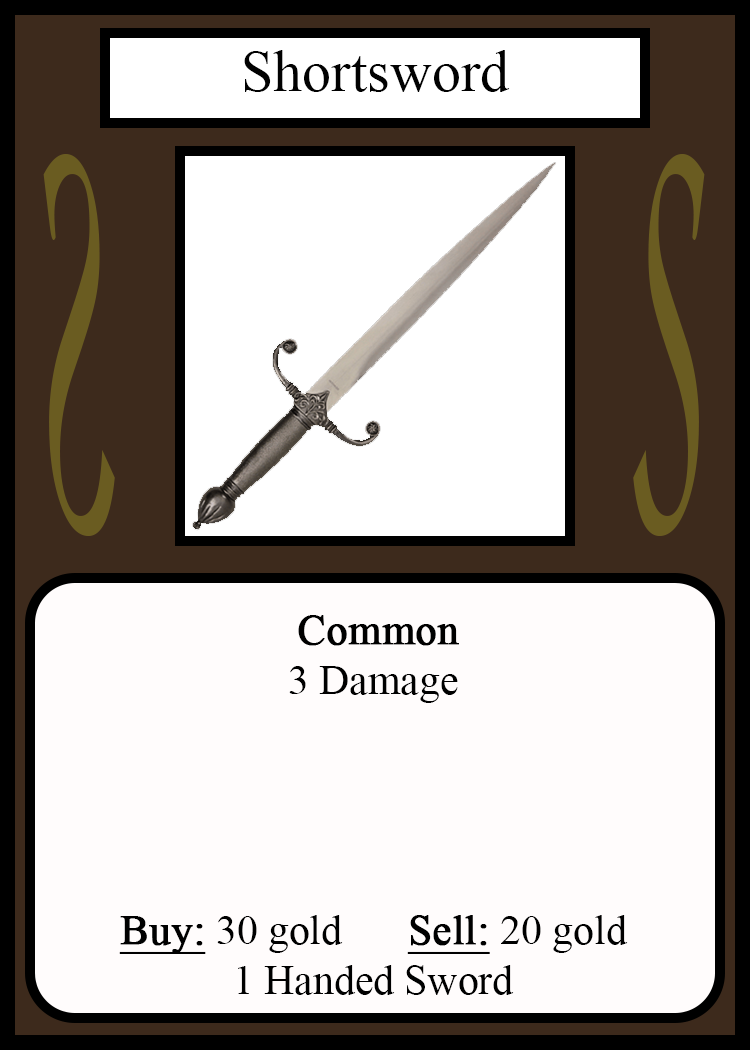
<style>
.page{position:relative;width:750px;height:1050px;background:#fffcfc}
.page>*{position:absolute;margin:0}
.t1{font:58.3px "TimesNewRomanPSMT";color:#010101}
.t2{font:548.5px "Apple-Chancery";color:#6a5c21;scale:0.27 1}
.t3{font:548.2px "Apple-Chancery";color:#6a5c21;scale:0.27 1}
.t4{font:41.7px "TimesNewRomanPSMT";color:#000000}
.t5{font:41.7px "TimesNewRomanPSMT";color:#000000;font-weight:bold}
.t6{font:41.7px "TimesNewRomanPSMT";color:#000000;font-weight:bold;text-decoration:underline}
</style>
<div class="page">
<p class="t1" style="left:244px;top:50px;width:266px;height:42px">Shortsword</p>
<p class="t2" style="left:43px;top:154px;width:72px;height:382px;rotate:180deg">S</p>
<p class="t3" style="left:633px;top:154px;width:72px;height:382px">S</p>
<p class="t4" style="left:119px;top:615px;width:509px;height:380px;text-align:center"><span class="t5">Common<br></span>3 Damage<br><br><br><br><br><span class="t6">Buy:</span> 30 gold   <span class="t6">Sell:</span> 20 gold<br>1 Handed Sword</p>
</div>
